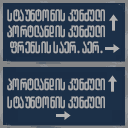
<style>
.page{position:relative;width:128px;height:128px;background:#1c3048}
.page>*{position:absolute;margin:0}
.t1{font:16.2px "ArchyEDT-Bold";color:#adadad;scale:0.74 1}
</style>
<div class="page">
<p class="t1" style="left:7px;top:9px;width:98px;height:13px">სტაუნტონის კუნძული</p>
<p class="t1" style="left:7px;top:25px;width:98px;height:13px">პორტლანდის კუნძული</p>
<p class="t1" style="left:10px;top:41px;width:93px;height:13px">ფრენსის საერ. აერ.</p>
<p class="t1" style="left:7px;top:78px;width:98px;height:13px">პორტლანდის კუნძული</p>
<p class="t1" style="left:7px;top:96px;width:98px;height:13px">სტაუნტონის კუნძული</p>
</div>
